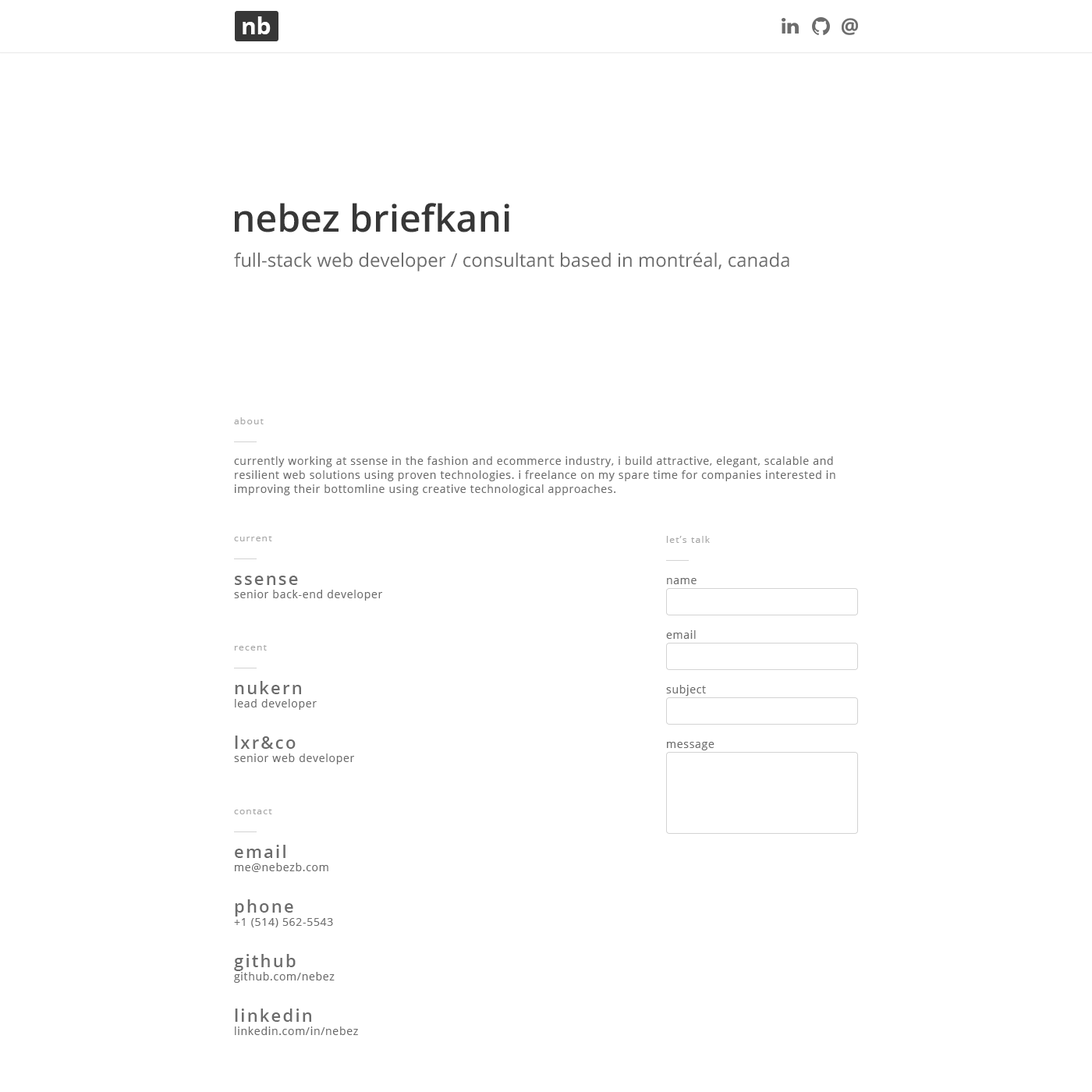
<style>
.page{position:relative;width:1092px;height:1092px;background:#ffffff}
.page>*{position:absolute;margin:0}
.t1{font:23.4px "OpenSans-Bold";color:#ffffff}
.t2{font:37.4px "OpenSans-Semibold";color:#373737}
.t3{font:18.7px "OpenSans";color:#6c6c6c}
.t4{font:9.4px "OpenSans";letter-spacing:0.1em;color:#a8a8a8}
.t5{font:10.9px/14px "OpenSans";letter-spacing:0.05em;color:#6c6c6c}
.t6{font:17.2px "OpenSans-Semibold";letter-spacing:0.1em;color:#6c6c6c}
.t7{font:10.9px "OpenSans";letter-spacing:0.05em;color:#6c6c6c}
</style>
<div class="page">
<p class="t1" style="left:243px;top:16px;width:28px;height:18px">nb</p>
<p class="t2" style="left:235px;top:203px;width:274px;height:29px">nebez briefkani</p>
<p class="t3" style="left:234px;top:252px;width:555px;height:19px">full-stack web developer / consultant based in montréal, canada</p>
<p class="t4" style="left:234px;top:417px;width:30px;height:7px">about</p>
<p class="t5" style="left:234px;top:456px;width:601px;height:39px">currently working at ssense in the fashion and ecommerce industry, i build attractive, elegant, scalable and resilient web solutions using proven technologies. i freelance on my spare time for companies interested in improving their bottomline using creative technological approaches.</p>
<p class="t4" style="left:234px;top:536px;width:38px;height:5px">current</p>
<p class="t4" style="left:666px;top:536px;width:44px;height:7px">let’s talk</p>
<p class="t6" style="left:235px;top:576px;width:63px;height:9px">ssense</p>
<p class="t7" style="left:667px;top:578px;width:30px;height:6px">name</p>
<p class="t7" style="left:234px;top:590px;width:149px;height:11px">senior back-end developer</p>
<p class="t7" style="left:666px;top:630px;width:30px;height:9px">email</p>
<p class="t4" style="left:234px;top:645px;width:33px;height:6px">recent</p>
<p class="t6" style="left:235px;top:681px;width:66px;height:13px">nukern</p>
<p class="t7" style="left:666px;top:685px;width:40px;height:11px">subject</p>
<p class="t7" style="left:235px;top:699px;width:82px;height:11px">lead developer</p>
<p class="t6" style="left:235px;top:736px;width:61px;height:13px">lxr&amp;co</p>
<p class="t7" style="left:667px;top:742px;width:47px;height:8px">message</p>
<p class="t7" style="left:234px;top:753px;width:121px;height:11px">senior web developer</p>
<p class="t4" style="left:234px;top:809px;width:38px;height:5px">contact</p>
<p class="t6" style="left:235px;top:845px;width:50px;height:13px">email</p>
<p class="t7" style="left:235px;top:863px;width:93px;height:9px">me@nebezb.com</p>
<p class="t6" style="left:235px;top:899px;width:58px;height:17px">phone</p>
<p class="t7" style="left:234px;top:918px;width:99px;height:9px">+1 (514) 562-5543</p>
<p class="t6" style="left:234px;top:954px;width:62px;height:17px">github</p>
<p class="t7" style="left:234px;top:972px;width:101px;height:11px">github.com/nebez</p>
<p class="t6" style="left:235px;top:1009px;width:76px;height:13px">linkedin</p>
<p class="t7" style="left:235px;top:1026px;width:123px;height:9px">linkedin.com/in/nebez</p>
</div>
